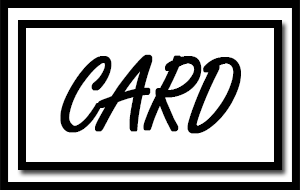
<style>
.page{position:relative;width:300px;height:190px;background:#ffffff}
.page>*{position:absolute;margin:0}
.t1{font:110px "FreestyleScript-Regular";letter-spacing:-0.04em;color:#000000;font-weight:bold;scale:0.91 1}
</style>
<div class="page">
<p class="t1" style="left:60px;top:54px;width:181px;height:80px">CARD</p>
</div>
